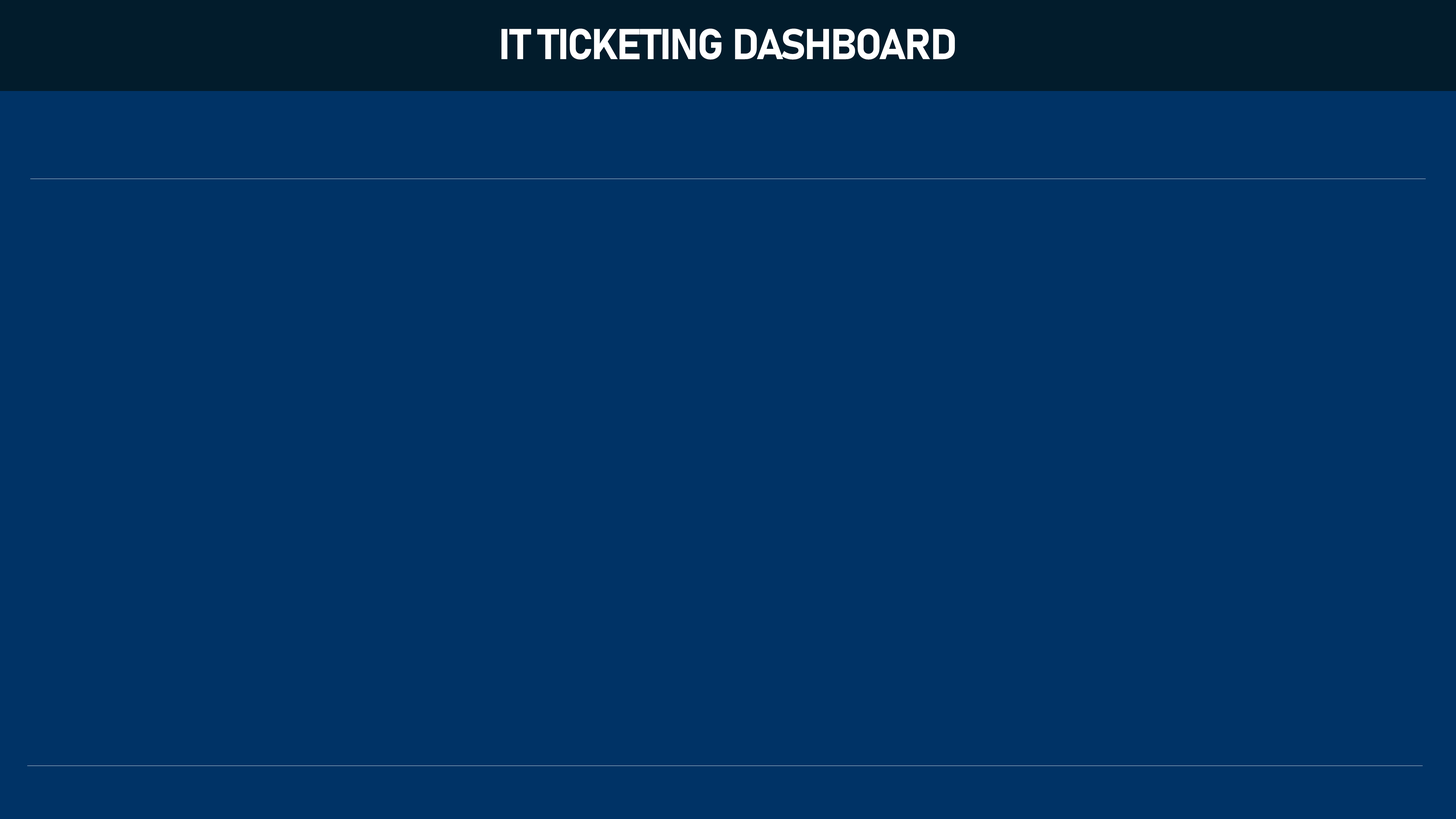
<style>
.page{position:relative;width:1456px;height:819px;background:#003366}
.page>*{position:absolute;margin:0}
.t1{font:42.5px "Bahnschrift-Bold";letter-spacing:-0.04em;color:#ffffff;text-transform:uppercase}
</style>
<div class="page">
<p class="t1" style="left:501px;top:29px;width:454px;height:31px">IT Ticketing Dashboard</p>
</div>
